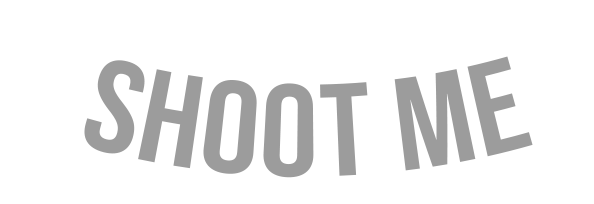
<style>
.page{position:relative;width:594px;height:204px;background:#ffffff}
.page>*{position:absolute;margin:0}
.t1{font:131.8px "BebasNeue-Regular";color:#9c9c9c}
</style>
<div class="page">
<p class="t1" style="left:84px;top:56px;width:449px;height:122px">shoot me</p>
</div>
